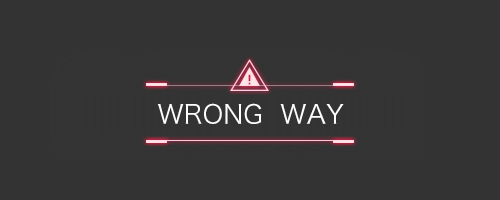
<style>
.page{position:relative;width:500px;height:200px;background:#333333}
.page>*{position:absolute;margin:0}
.t1{font:26px "HiraginoSansGB-W3";color:#ffffff}
</style>
<div class="page">
<p class="t1" style="left:157px;top:103px;width:187px;height:21px">WRONG  WAY</p>
</div>
